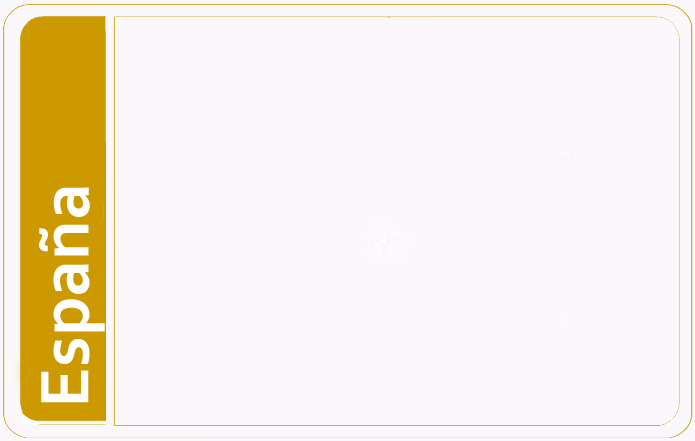
<style>
.page{position:relative;width:695px;height:441px;background:#fbf8fb}
.page>*{position:absolute;margin:0}
.t1{font:72px "Corbel-Bold";color:#ffffff}
</style>
<div class="page">
<p class="t1" style="left:39px;top:187px;width:66px;height:216px;rotate:-90deg">España</p>
</div>
